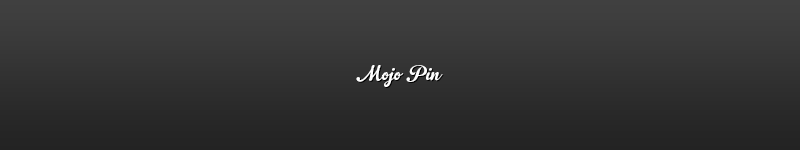
<style>
.page{position:relative;width:800px;height:150px}
.page>*{position:absolute;margin:0}
.t1{font:21px "GelatoScript";color:#ffffff}
</style>
<div class="page">
<p class="t1" style="left:356px;top:65px;width:87px;height:22px">Mojo Pin</p>
</div>
